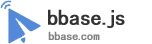
<style>
.page{position:relative;width:152px;height:44px;background:#ffffff}
.page>*{position:absolute;margin:0}
.t1{font:22px "SimHei";letter-spacing:0.05em;color:#333333;font-weight:bold}
.t2{font:12px "SimHei";letter-spacing:0.05em;color:#818181;font-weight:bold}
</style>
<div class="page">
<p class="t1" style="left:48px;top:9px;width:77px;height:19px">bbase.js</p>
<p class="t2" style="left:48px;top:31px;width:52px;height:9px">bbase.com</p>
</div>
